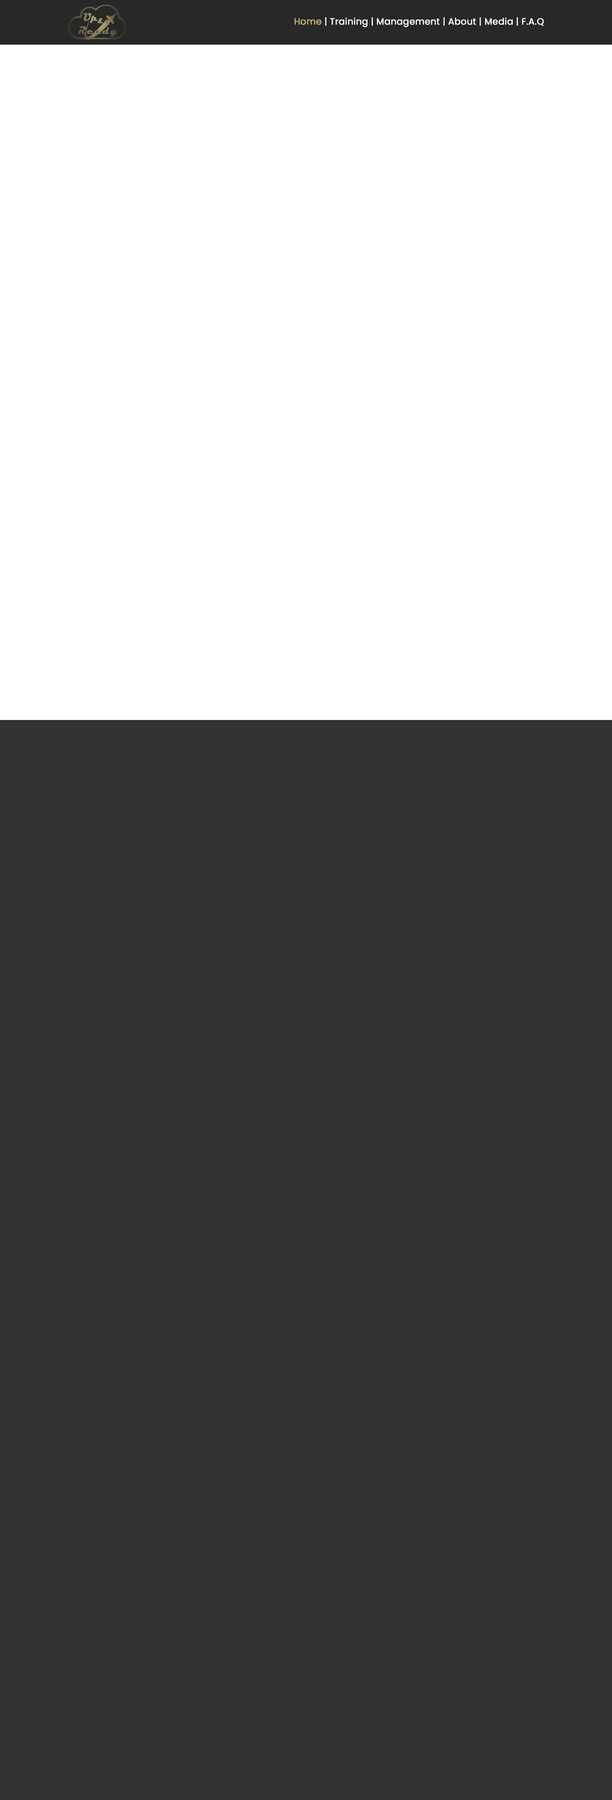
<style>
.page{position:relative;width:612px;height:1800px;background:#333333}
.page>*{position:absolute;margin:0}
.t1{font:9px "Poppins-Regular";color:#fefdfd;font-weight:bold}
.t2{font:9px "Poppins-Regular";color:#c8b66c;font-weight:bold}
</style>
<div class="page">
<p class="t1" style="left:294px;top:17px;width:250px;height:10px"><span class="t2">Home</span> | Training | Management | About | Media | F.A.Q</p>
</div>
